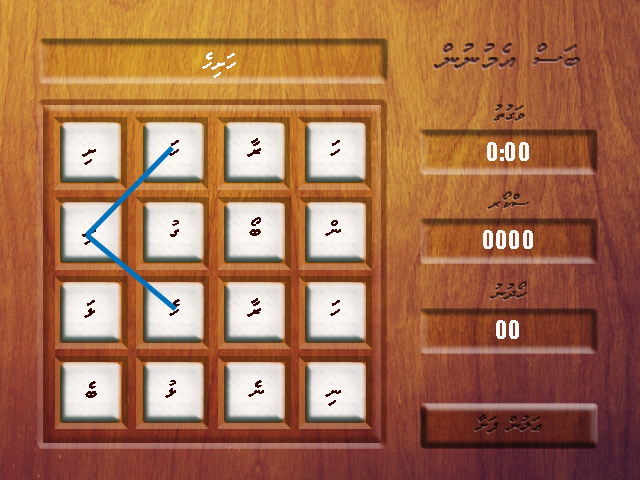
<style>
.page{position:relative;width:640px;height:480px}
.page>*{position:absolute;margin:0}
.t1{font:24px "MVWaheed";letter-spacing:0.01em;color:#fefefe}
.t2{font:30px "MVFaseyha";letter-spacing:0.01em}
.t3{font:18px "MVFaseyha";letter-spacing:0.01em}
.t4{font:24px "MVWaheed";letter-spacing:0.01em;color:#340707}
.t5{font:24px "Impact";letter-spacing:0.01em;color:#f8f8f8}
.t6{font:18px "MVFaseyha";letter-spacing:0.01em;color:#361e16}
.t7{font:24px "MVWaheed";letter-spacing:0.01em}
.t8{font:18.1px "MVFaseyha";letter-spacing:0.01em;color:#331a15}
</style>
<div class="page">
<p class="t1" style="left:202px;top:52px;width:34px;height:26px">ެހިށަހ</p>
<p class="t2" style="left:434px;top:44px;width:145px;height:25px">ްނުނުމެއ ްސަބ</p>
<p class="t3" style="left:494px;top:105px;width:30px;height:16px">ުތުގަވ</p>
<p class="t4" style="left:82px;top:149px;width:14px;height:16px">ިށ</p>
<p class="t4" style="left:169px;top:140px;width:10px;height:16px">ަހ</p>
<p class="t4" style="left:247px;top:138px;width:14px;height:19px">ާރ</p>
<p class="t4" style="left:330px;top:140px;width:10px;height:16px">ަހ</p>
<p class="t5" style="left:487px;top:142px;width:42px;height:19px">0:00</p>
<p class="t6" style="left:488px;top:192px;width:40px;height:17px">ރޯކްސ</p>
<p class="t4" style="left:170px;top:220px;width:9px;height:17px">ުގ</p>
<p class="t4" style="left:249px;top:217px;width:12px;height:19px">ޯބ</p>
<p class="t4" style="left:325px;top:220px;width:16px;height:16px">ްނ</p>
<p class="t7" style="left:82px;top:229px;width:14px;height:16px">ިށ</p>
<p class="t5" style="left:483px;top:230px;width:50px;height:19px">0000</p>
<p class="t8" style="left:490px;top:282px;width:36px;height:18px">ުނުދޯހ</p>
<p class="t4" style="left:84px;top:300px;width:11px;height:18px">ަޅ</p>
<p class="t4" style="left:169px;top:299px;width:11px;height:17px">ެހ</p>
<p class="t4" style="left:247px;top:298px;width:14px;height:19px">ާރ</p>
<p class="t4" style="left:330px;top:300px;width:10px;height:16px">ަހ</p>
<p class="t5" style="left:496px;top:320px;width:23px;height:19px">00</p>
<p class="t4" style="left:85px;top:381px;width:12px;height:17px">ެބ</p>
<p class="t4" style="left:165px;top:380px;width:11px;height:18px">ުޅ</p>
<p class="t4" style="left:248px;top:380px;width:16px;height:17px">ެނ</p>
<p class="t4" style="left:325px;top:390px;width:16px;height:16px">ިނ</p>
</div>
